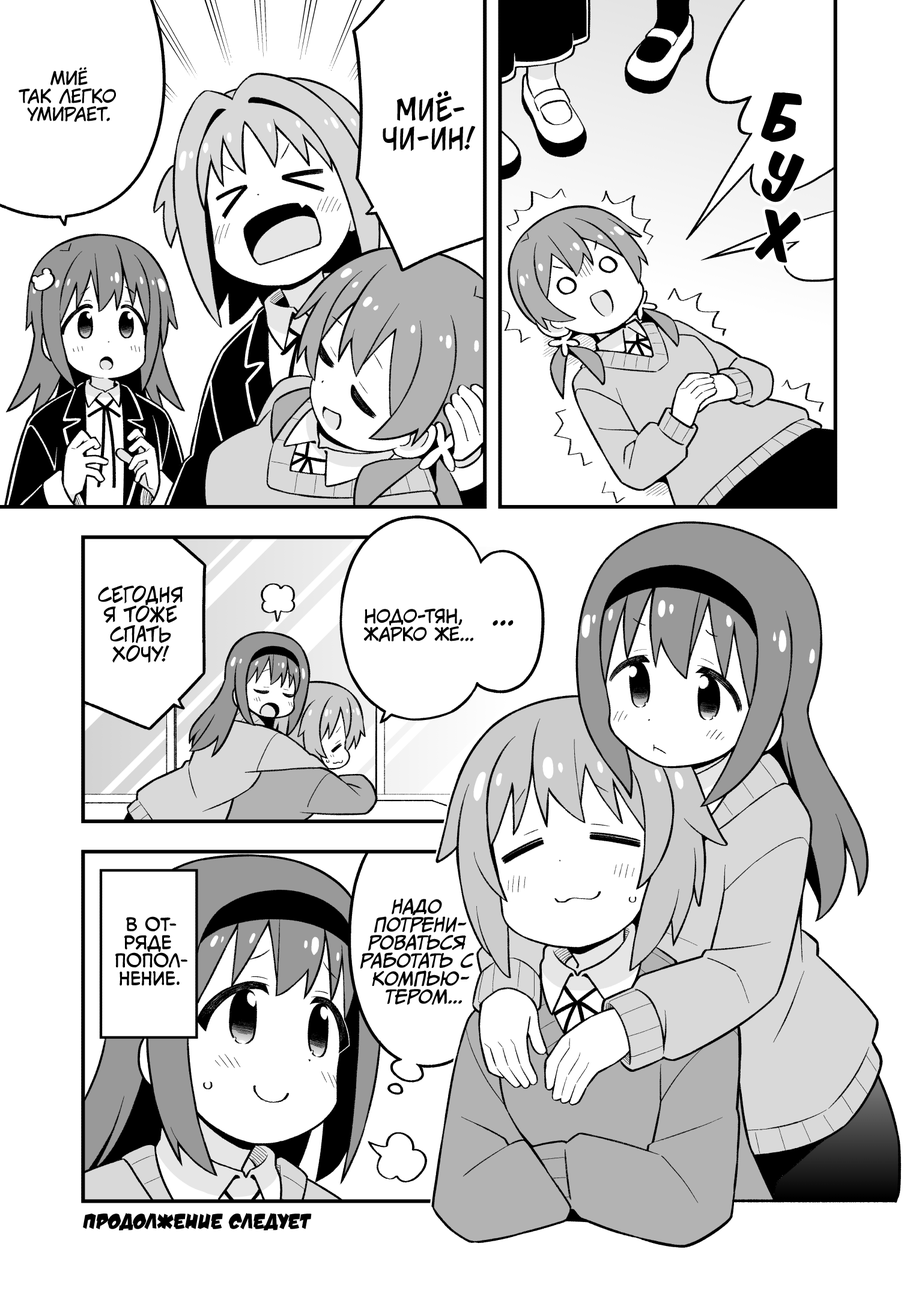
<style>
.page{position:relative;width:919px;height:1297px;background:#ffffff}
.page>*{position:absolute;margin:0}
.t1{font:18px "KuraiVoice2";color:#000000;text-transform:uppercase}
.t2{font:28.8px "v_CCJeffCampbell";color:#000000;text-transform:uppercase}
.t3{font:57.7px "KomikaTitle-AxisRUS-LAT";color:#000000;scale:0.9 1}
.t4{font:19.8px "v_CCJeffCampbell";color:#000000;text-transform:uppercase}
.t5{font:28.8px "KuraiVoice2";color:#000000;text-transform:uppercase}
.t6{font:18px "CCMeanwhile";color:#000000;text-transform:uppercase;font-style:italic}
.t7{font:18px "v_CCMonologous";color:#000000;text-transform:uppercase}
.t8{font:21.6px "v_DamnNoisyKids";color:#000000;text-transform:uppercase}
</style>
<div class="page">
<p class="t1" style="left:19px;top:67px;width:97px;height:55px;text-align:center">Миё<br>так легко<br>умирает.</p>
<p class="t2" style="left:383px;top:91px;width:93px;height:60px;text-align:center">Миё-<br>чи-ин!</p>
<p class="t3" style="left:761px;top:93px;width:41px;height:49px;rotate:12deg">б</p>
<p class="t3" style="left:762px;top:151px;width:42px;height:51px;rotate:14deg">у</p>
<p class="t3" style="left:755px;top:209px;width:46px;height:54px;rotate:9deg">х</p>
<p class="t4" style="left:98px;top:586px;width:85px;height:77px;text-align:center">Сегодня<br>я тоже<br>спать<br>хочу!</p>
<p class="t1" style="left:364px;top:608px;width:109px;height:34px;text-align:center">Нодо-тян,<br>жарко же...</p>
<p class="t5" style="left:493px;top:621px;width:21px;height:5px">...</p>
<p class="t6" style="left:360px;top:899px;width:114px;height:107px;text-align:center">Надо<br>потрени-<br>роваться<br>работать с<br>компью-<br>тером...</p>
<p class="t7" style="left:115px;top:917px;width:72px;height:69px;text-align:center">В от-<br>ряде<br>попол-<br>нение.</p>
<p class="t8" style="left:83px;top:1213px;width:229px;height:18px">Продолжение следует</p>
</div>
